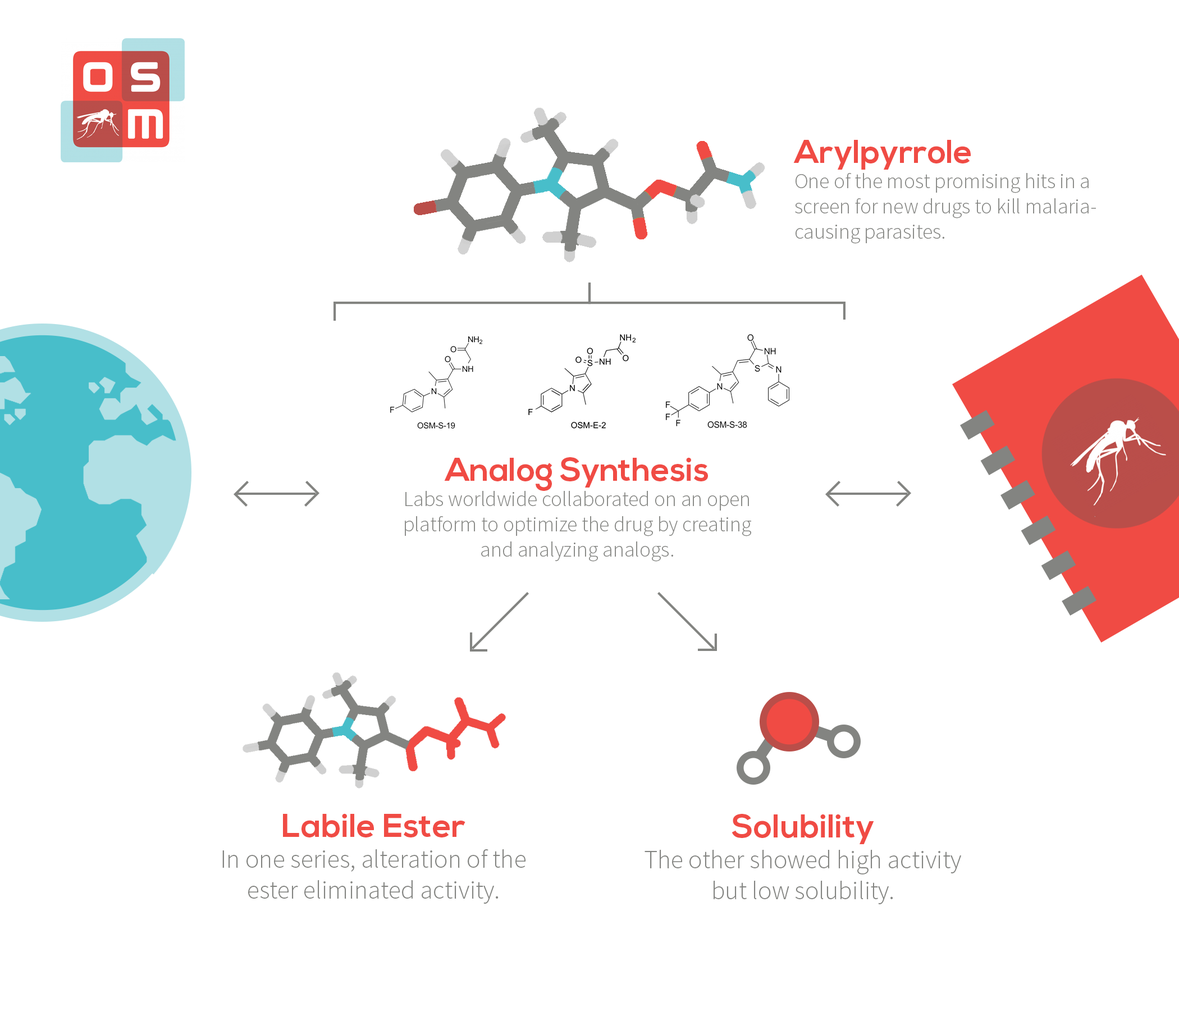
<style>
.page{position:relative;width:1179px;height:1011px;background:#ffffff}
.page>*{position:absolute;margin:0}
.t1{font:21.1px "SourceSansPro-Light";color:#838481}
.t2{font:32.8px "NexaBold";color:#f04b44}
.t3{font:25.7px "SourceSansPro-Light";color:#838481}
</style>
<div class="page">
<p class="t1" style="left:794px;top:140px;width:302px;height:104px"><span class="t2">Arylpyrrole<br></span>One of the most promising hits in a <br>screen for new drugs to kill malaria-<br>causing parasites.</p>
<p class="t1" style="left:405px;top:457px;width:346px;height:105px;text-align:center"><span class="t2">Analog Synthesis<br></span>Labs worldwide collaborated on an open<br>platform to optimize the drug by creating<br>and analyzing analogs.</p>
<p class="t3" style="left:222px;top:813px;width:304px;height:91px;text-align:center"><span class="t2">Labile Ester<br></span>In one series, alteration of the<br>ester eliminated activity.</p>
<p class="t3" style="left:645px;top:814px;width:317px;height:90px;text-align:center"><span class="t2">Solubility<br></span>The other showed high activity<br>but low solubility.</p>
</div>
